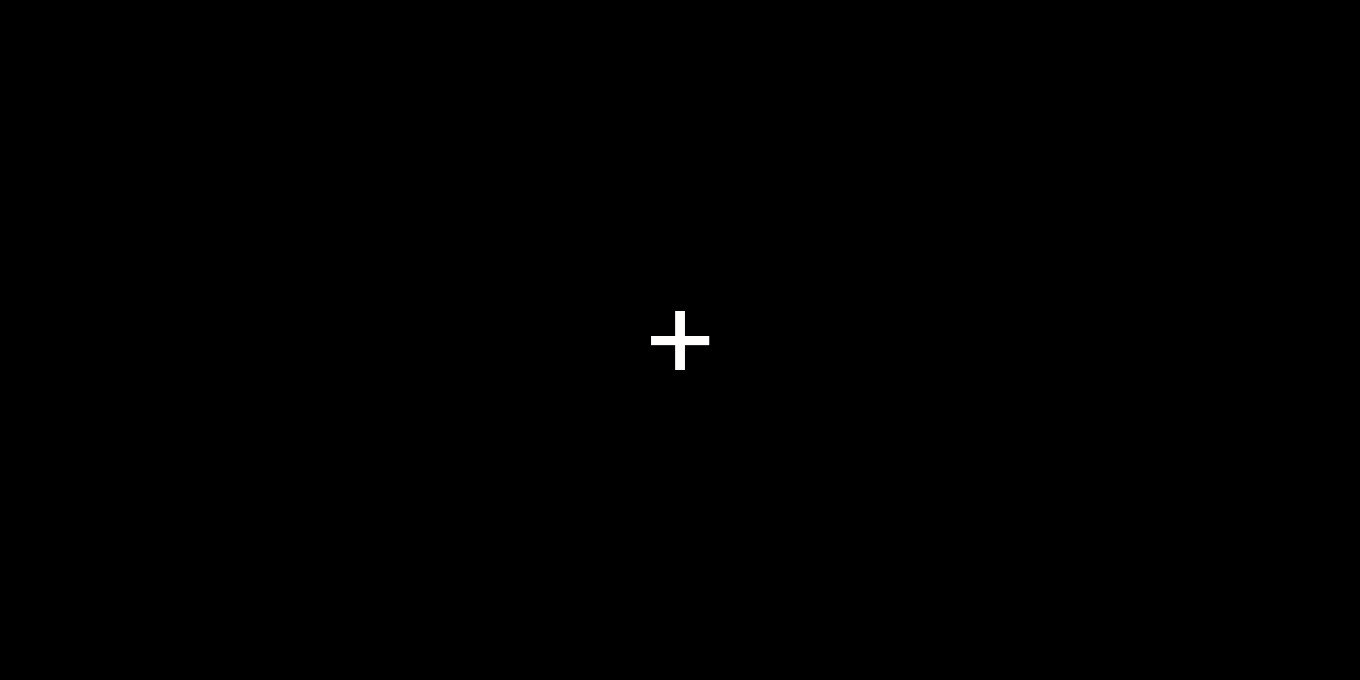
<style>
.page{position:relative;width:1360px;height:680px;background:#000000}
.page>*{position:absolute;margin:0}
.t1{font:134.4px "Cambria";color:#fffefd}
</style>
<div class="page">
<p class="t1" style="left:651px;top:311px;width:59px;height:59px">+</p>
</div>
